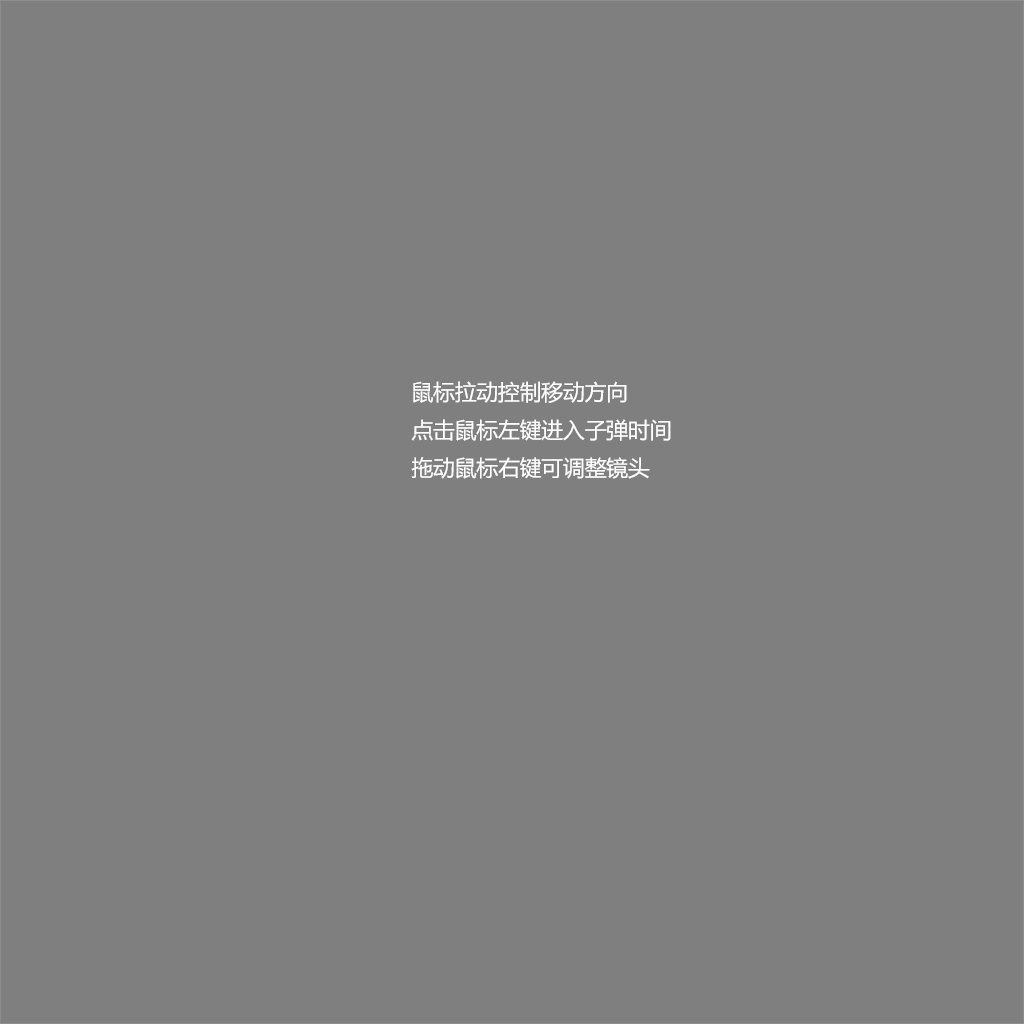
<style>
.page{position:relative;width:1024px;height:1024px;background:#7f7f7f}
.page>*{position:absolute;margin:0}
.t1{font:21.7px "MicrosoftYaHei";color:#ffffff}
</style>
<div class="page">
<p class="t1" style="left:411px;top:381px;width:260px;height:98px">鼠标拉动控制移动方向<br>点击鼠标左键进入子弹时间拖动鼠标右键可调整镜头</p>
</div>
